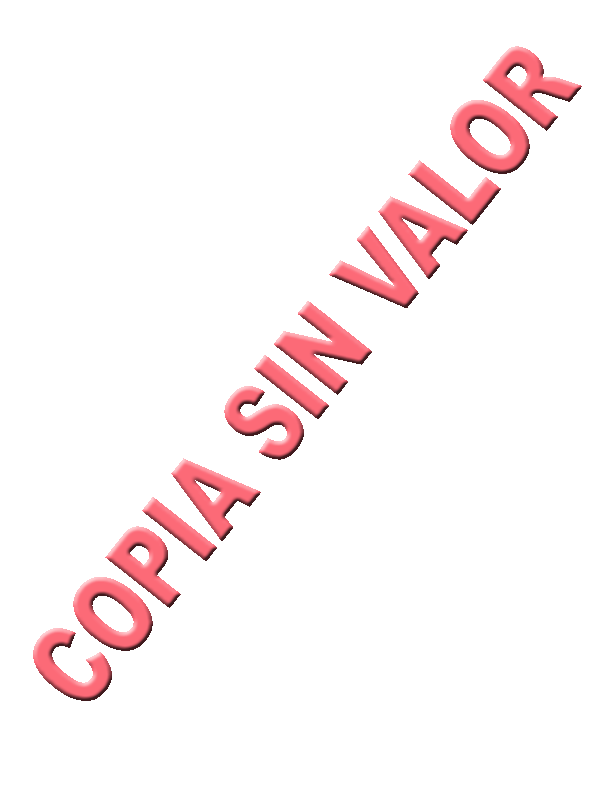
<style>
.page{position:relative;width:612px;height:792px;background:#ffffff}
.page>*{position:absolute;margin:0}
.t1{font:115.2px "Arial-Black";scale:0.71 1}
</style>
<div class="page">
<p class="t1" style="left:33px;top:46px;width:549px;height:655px;rotate:-52deg">COPIA SIN VALOR</p>
</div>
